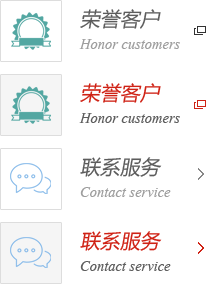
<style>
.page{position:relative;width:206px;height:284px;background:#ffffff}
.page>*{position:absolute;margin:0}
.t1{font:20px "MicrosoftYaHei";color:#5c5c5c;font-style:italic}
.t2{font:18px "Vijaya";color:#9e9e9e}
.t3{font:20px "MicrosoftYaHei";color:#cf2215;font-style:italic}
.t4{font:18px "Vijaya";color:#5e5e5e}
</style>
<div class="page">
<p class="t1" style="left:80px;top:9px;width:81px;height:20px">荣誉客户</p>
<p class="t2" style="left:79px;top:39px;width:101px;height:10px">Honor customers</p>
<p class="t3" style="left:80px;top:83px;width:81px;height:20px">荣誉客户</p>
<p class="t4" style="left:79px;top:113px;width:101px;height:10px">Honor customers</p>
<p class="t1" style="left:80px;top:157px;width:82px;height:20px">联系服务</p>
<p class="t2" style="left:80px;top:187px;width:91px;height:10px">Contact service</p>
<p class="t3" style="left:80px;top:231px;width:82px;height:20px">联系服务</p>
<p class="t4" style="left:80px;top:261px;width:91px;height:10px">Contact service</p>
</div>
